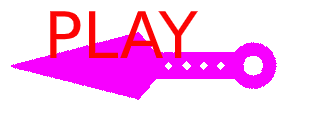
<style>
.page{position:relative;width:320px;height:126px;background:#ffffff}
.page>*{position:absolute;margin:0}
.t1{font:64px "DejaVuSans";color:#fc0404}
</style>
<div class="page">
<p class="t1" style="left:50px;top:11px;width:148px;height:47px">PLAY</p>
</div>
